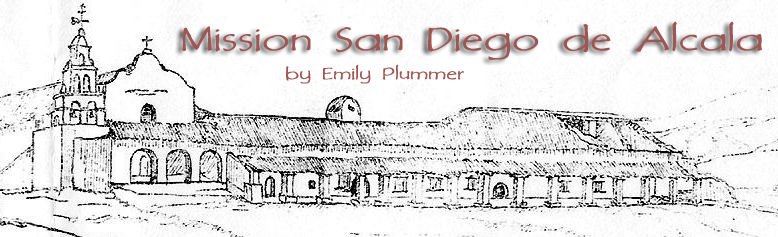
<style>
.page{position:relative;width:778px;height:237px;background:#ffffff}
.page>*{position:absolute;margin:0}
.t1{font:36px "DiMurphic";letter-spacing:0.05em;color:#9e5654}
.t2{font:18px "DiMurphic";letter-spacing:0.05em;color:#9e5654}
</style>
<div class="page">
<p class="t1" style="left:182px;top:21px;width:580px;height:39px">Mission San Diego de Alcala</p>
<p class="t2" style="left:286px;top:64px;width:179px;height:20px">by Emily Plummer</p>
</div>
